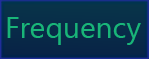
<style>
.page{position:relative;width:149px;height:59px}
.page>*{position:absolute;margin:0}
.t1{font:30px "SegoeUISymbol";color:#19b579}
</style>
<div class="page">
<p class="t1" style="left:7px;top:17px;width:134px;height:28px">Frequency</p>
</div>
